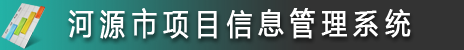
<style>
.page{position:relative;width:464px;height:50px;background:#333333}
.page>*{position:absolute;margin:0}
.t1{font:30px "MicrosoftYaHei";letter-spacing:0.24em;color:#ffffff;font-weight:bold;scale:0.83 1}
</style>
<div class="page">
<p class="t1" style="left:68px;top:8px;width:343px;height:31px">河源市项目信息管理系统</p>
</div>
